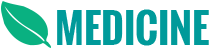
<style>
.page{position:relative;width:209px;height:48px;background:#ffffff}
.page>*{position:absolute;margin:0}
.t1{font:40px "Oswald-Bold";color:#009a9a;text-transform:uppercase}
</style>
<div class="page">
<p class="t1" style="left:57px;top:9px;width:152px;height:37px">Medicine</p>
</div>
